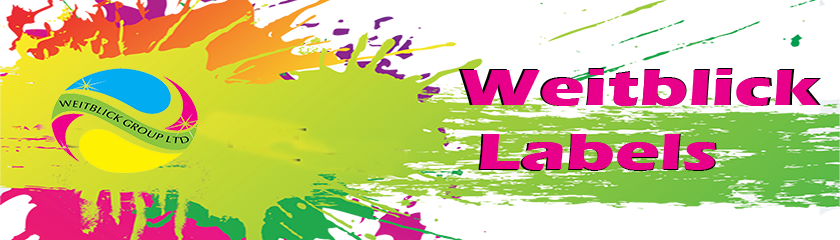
<style>
.page{position:relative;width:840px;height:240px;background:#ffffff}
.page>*{position:absolute;margin:0}
.t1{font:54.2px "ErasITC-Bold";color:#e9008a;scale:1.4 1}
.t2{font:53.3px "ErasITC-Bold";color:#e9008a;scale:1.4 1}
</style>
<div class="page">
<p class="t1" style="left:458px;top:68px;width:363px;height:103px">Weitblick<br> Labels</p>
<p class="t2" style="left:461px;top:69px;width:358px;height:101px">Weitblick<br> Labels</p>
</div>
